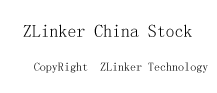
<style>
.page{position:relative;width:217px;height:93px;background:#ffffff}
.page>*{position:absolute;margin:0}
.t1{font:17.8px "SimSun";color:#000000}
.t2{font:12px "SimSun"}
</style>
<div class="page">
<p class="t1" style="left:23px;top:24px;width:169px;height:13px">ZLinker China Stock</p>
<p class="t2" style="left:34px;top:62px;width:174px;height:11px">CopyRight  ZLinker Technology</p>
</div>
